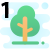
<style>
.page{position:relative;width:50px;height:50px;background:#ffffff}
.page>*{position:absolute;margin:0}
.t1{font:24px "MyriadHebrew-Bold";color:#000000}
</style>
<div class="page">
<p class="t1" style="left:1px;top:2px;width:8px;height:16px">1</p>
</div>
